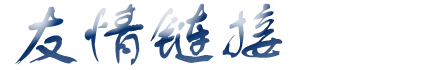
<style>
.page{position:relative;width:445px;height:70px;background:#ffffff}
.page>*{position:absolute;margin:0}
.t1{font:72px "FZSTK--GBK1-0";letter-spacing:-0.04em}
</style>
<div class="page">
<p class="t1" style="left:15px;top:3px;width:268px;height:62px">友情链接</p>
</div>
